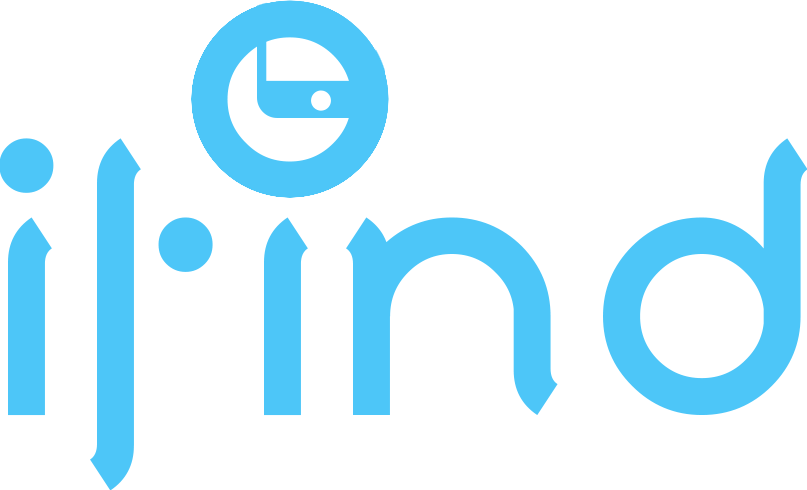
<style>
.page{position:relative;width:807px;height:490px;background:#ffffff}
.page>*{position:absolute;margin:0}
.t1{font:394.6px "VAIOCONDIOS";color:#4dc6f8}
</style>
<div class="page">
<p class="t1" style="left:0px;top:138px;width:808px;height:353px">ifInd</p>
</div>
